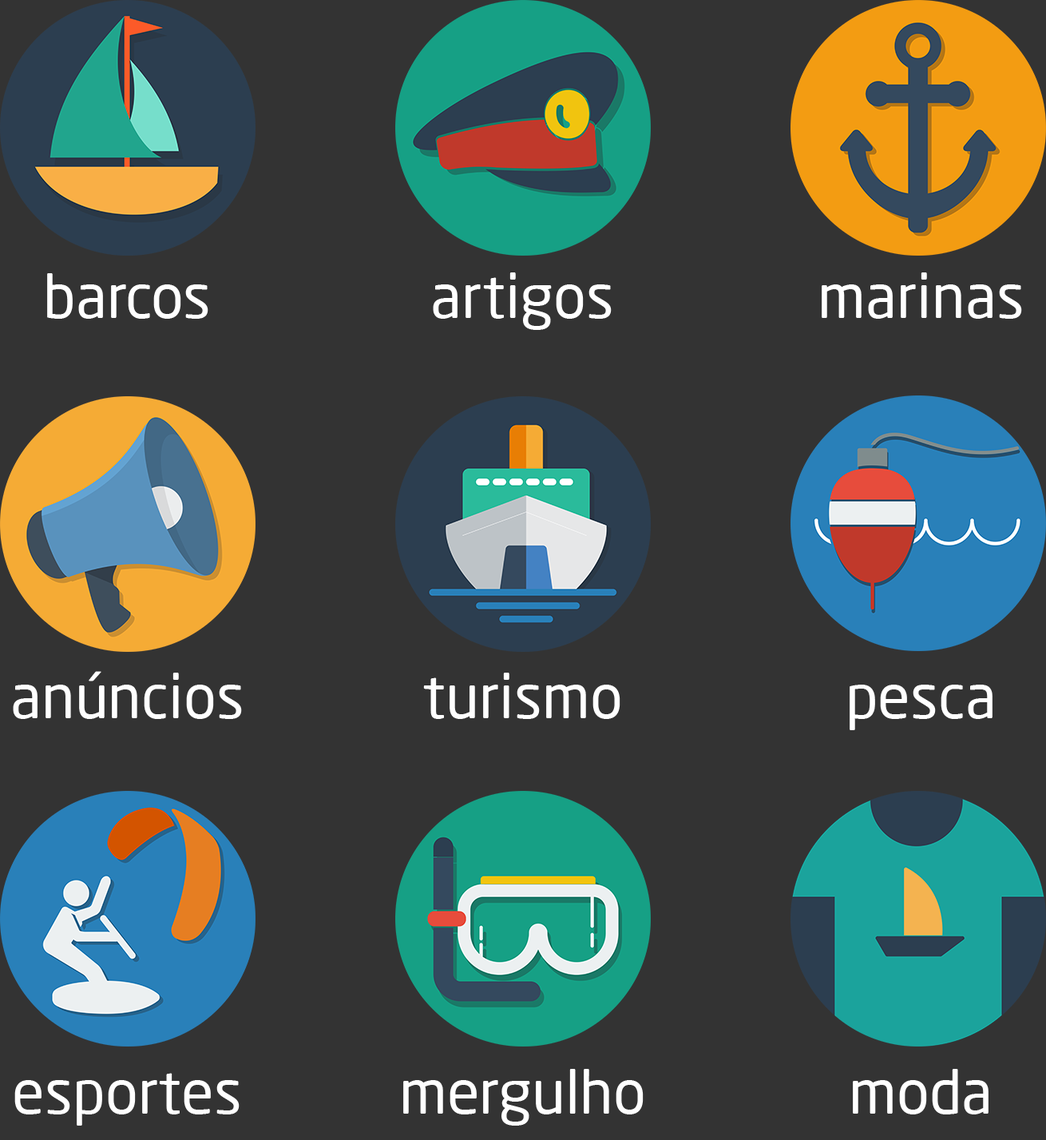
<style>
.page{position:relative;width:1046px;height:1140px;background:#333333}
.page>*{position:absolute;margin:0}
.t1{font:59.9px "NeoSansPro-Regular";color:#ffffff}
</style>
<div class="page">
<p class="t1" style="left:47px;top:273px;width:161px;height:46px">barcos</p>
<p class="t1" style="left:433px;top:272px;width:179px;height:58px">artigos</p>
<p class="t1" style="left:822px;top:272px;width:200px;height:47px">marinas</p>
<p class="t1" style="left:13px;top:671px;width:229px;height:48px">anúncios</p>
<p class="t1" style="left:423px;top:672px;width:198px;height:47px">turismo</p>
<p class="t1" style="left:850px;top:684px;width:143px;height:46px">pesca</p>
<p class="t1" style="left:14px;top:1073px;width:226px;height:52px">esportes</p>
<p class="t1" style="left:403px;top:1069px;width:241px;height:56px">mergulho</p>
<p class="t1" style="left:853px;top:1069px;width:136px;height:45px">moda</p>
</div>
